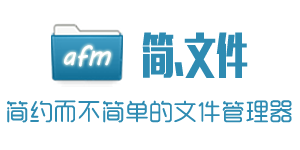
<style>
.page{position:relative;width:300px;height:150px;background:#ffffff}
.page>*{position:absolute;margin:0}
.t1{font:48px "MFLiHei_Noncommercial-Regular";color:#2e8bb2;scale:0.67 1}
.t2{font:24px "MFYueYuan_Noncommercial-Regular";color:#2e8bb2}
</style>
<div class="page">
<p class="t1" style="left:142px;top:32px;width:106px;height:46px">简.文件</p>
<p class="t2" style="left:7px;top:100px;width:285px;height:23px">简约而不简单的文件管理器</p>
</div>
